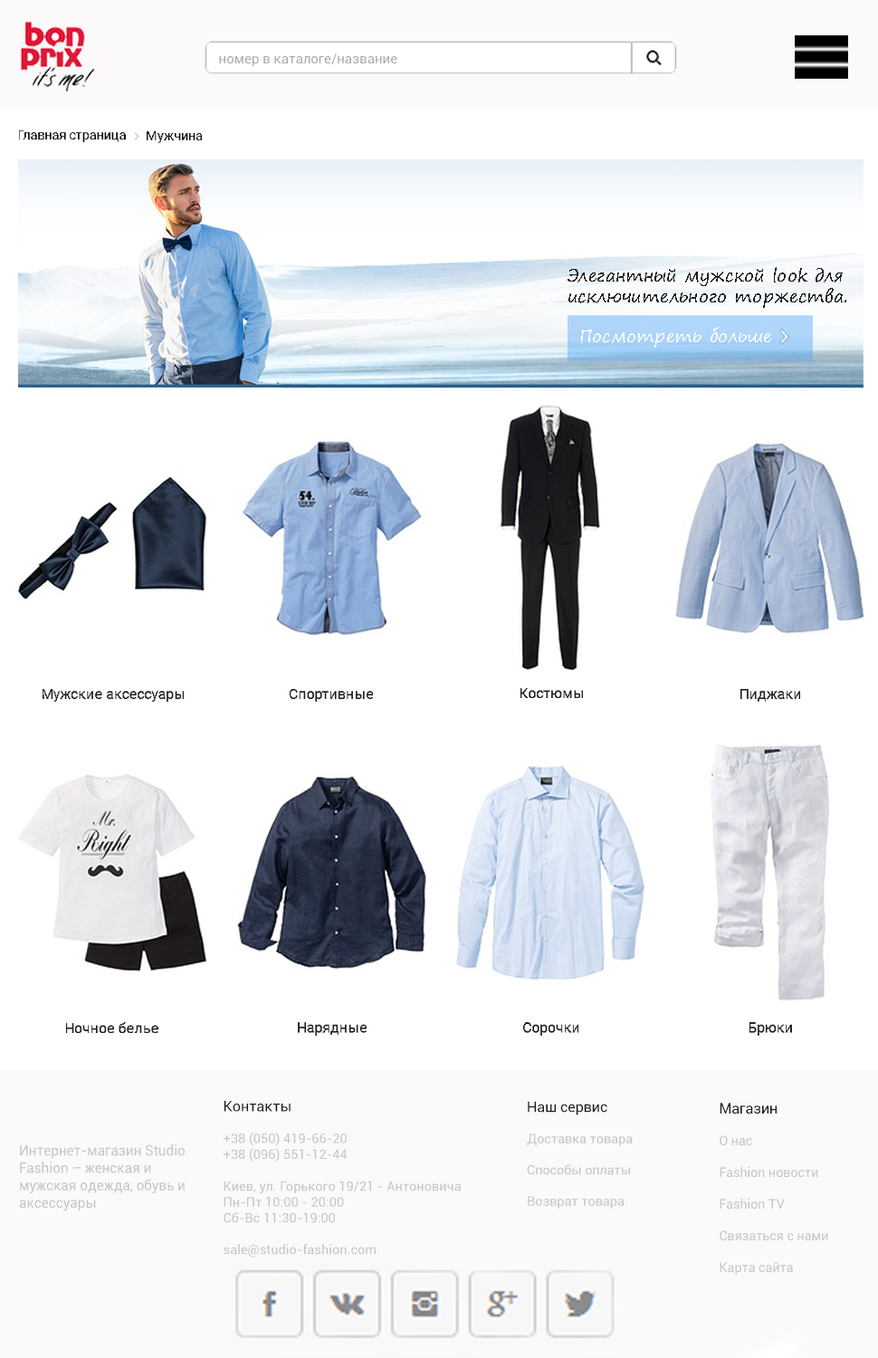
<style>
.page{position:relative;width:878px;height:1358px;background:#ffffff}
.page>*{position:absolute;margin:0}
.t1{font:13.7px "Roboto-Regular";color:#acacac}
.t2{font:13px "Roboto-Regular";color:#090808}
.t3{font:17.3px "SegoePrint";color:#1d1e1f}
.t4{font:17.3px "SegoePrint";color:#ffffff}
.t5{font:14.4px "Roboto-Regular";color:#1d1e1f}
.t6{font:13.2px "Roboto-Regular";color:#c7c4c4}
.t7{font:14.7px "Roboto-Regular";color:#1e1b1b}
.t8{font:13px "Roboto-Regular";color:#c7c4c4}
.t9{font:14.5px "Roboto-Regular";color:#1e1b1b}
.t10{font:14.5px "Roboto-Regular";color:#c7c4c4;scale:0.95 1}
</style>
<div class="page">
<p class="t1" style="left:219px;top:53px;width:178px;height:13px">номер в каталоге/название</p>
<p class="t2" style="left:19px;top:130px;width:107px;height:12px">Главная страница</p>
<p class="t2" style="left:147px;top:131px;width:55px;height:12px">Мужчина</p>
<p class="t3" style="left:568px;top:267px;width:278px;height:41px;text-align:right">Элегантный мужской look для<br>исключительного торжества.</p>
<p class="t4" style="left:581px;top:327px;width:190px;height:21px">Посмотреть больше</p>
<p class="t5" style="left:43px;top:689px;width:141px;height:13px">Мужские аксессуары</p>
<p class="t5" style="left:290px;top:689px;width:83px;height:13px">Спортивные</p>
<p class="t5" style="left:521px;top:688px;width:62px;height:10px">Костюмы</p>
<p class="t5" style="left:741px;top:689px;width:59px;height:13px">Пиджаки</p>
<p class="t5" style="left:66px;top:1022px;width:92px;height:11px">Ночное белье</p>
<p class="t5" style="left:298px;top:1022px;width:69px;height:14px">Нарядные</p>
<p class="t5" style="left:523px;top:1022px;width:55px;height:14px">Сорочки</p>
<p class="t5" style="left:750px;top:1022px;width:42px;height:14px">Брюки</p>
<p class="t6" style="left:224px;top:1101px;width:237px;height:156px;text-align:right"><span class="t7">Контакты<br></span><br>+38 (050) 419-66-20<br>+38 (096) 551-12-44<br><br>Киев, ул. Горького 19/21 - Антоновича<br>Пн-Пт 10:00 - 20:00<br>Cб-Вс 11:30-19:00<br><br>sale@studio-fashion.com</p>
<p class="t8" style="left:527px;top:1101px;width:106px;height:108px;text-align:right"><span class="t9">Наш сервис<br></span><br>Доставка товара <br><br>Способы оплаты<br><br>Возврат товара</p>
<p class="t6" style="left:720px;top:1103px;width:108px;height:172px;text-align:right"><span class="t7">Магазин<br></span><br>О нас<br><br>Fashion новости<br><br>Fashion TV<br><br>Связаться с нами<br><br>Карта сайта</p>
<p class="t10" style="left:19px;top:1144px;width:166px;height:67px;text-align:right">Интернет-магазин Studio <br>Fashion – женская и <br>мужская одежда, обувь и <br>аксессуары</p>
</div>
